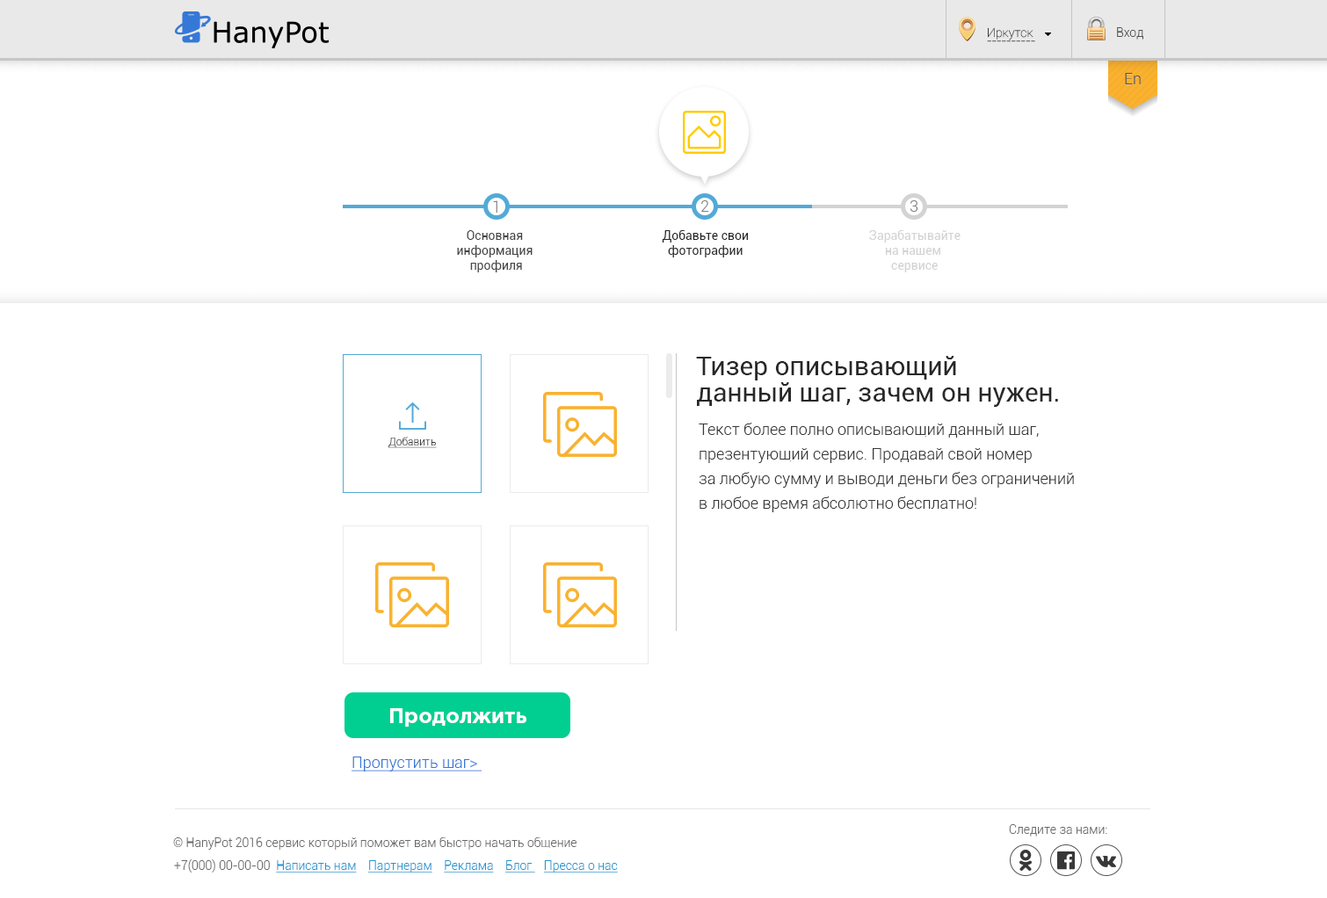
<style>
.page{position:relative;width:1327px;height:898px;background:#ffffff}
.page>*{position:absolute;margin:0}
.t1{font:12.3px/7.9px "Roboto-Thin";color:#393939}
.t2{font:12.3px "Roboto-Light";color:#525252}
.t3{font:15.8px "Roboto-Light";color:#525252}
.t4{font:15.8px "Roboto-Light";color:#7e7e7e}
.t5{font:12.3px "Roboto-Regular";color:#464646}
.t6{font:12.3px "Roboto-Regular";color:#282828}
.t7{font:12.3px "Roboto-Regular";color:#d3d3d3}
.t8{font:26.4px/26.4px "Roboto-Regular";color:#282828}
.t9{font:15.8px/24.6px "Roboto-Light";color:#393939}
.t10{font:10.5px "Roboto-Light";color:#393939;text-decoration:underline}
.t11{font:21.1px "GothamPro-Bold";color:#ffffff}
.t12{font:15.8px "Roboto-Light";color:#3678d7;text-decoration:underline}
.t13{font:12.3px "Roboto-Light";color:#696969}
.t14{font:12.3px "Roboto-Light";color:#2196d1;text-decoration:underline}
</style>
<div class="page">
<p class="t1" style="left:987px;top:27px;width:48px;height:15px">Иркутск<br>----------</p>
<p class="t2" style="left:1117px;top:27px;width:27px;height:13px">Вход</p>
<p class="t3" style="left:1125px;top:73px;width:16px;height:11px">En</p>
<p class="t4" style="left:493px;top:200px;width:5px;height:13px">1</p>
<p class="t4" style="left:701px;top:200px;width:8px;height:12px">2</p>
<p class="t4" style="left:910px;top:200px;width:9px;height:12px">3</p>
<p class="t5" style="left:457px;top:230px;width:76px;height:42px;text-align:center">Основная <br>информация <br>профиля</p>
<p class="t6" style="left:662px;top:230px;width:87px;height:28px;text-align:center">Добавьте свои<br>фотографии</p>
<p class="t7" style="left:869px;top:230px;width:92px;height:42px;text-align:center">Зарабатывайте<br>на нашем <br>сервисе</p>
<p class="t8" style="left:696px;top:356px;width:362px;height:51px">Тизер описывающий<br>данный шаг, зачем он нужен.</p>
<p class="t9" style="left:699px;top:423px;width:375px;height:89px">Текст более полно описывающий данный шаг, <br>презентующий сервис. Продавай свой номер <br>за любую сумму и выводи деньги без ограничений <br>в любое время абсолютно бесплатно!</p>
<p class="t10" style="left:389px;top:437px;width:48px;height:11px">Добавить</p>
<p class="t11" style="left:390px;top:708px;width:137px;height:19px">Продолжить</p>
<p class="t12" style="left:352px;top:757px;width:131px;height:15px">Пропустить шаг&gt;</p>
<p class="t13" style="left:1009px;top:825px;width:99px;height:12px">Следите за нами:</p>
<p class="t13" style="left:173px;top:838px;width:404px;height:12px">© HanyPot 2016 сервис который поможет вам быстро начать общение</p>
<p class="t14" style="left:174px;top:860px;width:444px;height:13px"><span class="t13">+7(000) 00-00-00  </span>Написать нам    Партнерам    Реклама    Блог    Пресса о нас</p>
</div>
